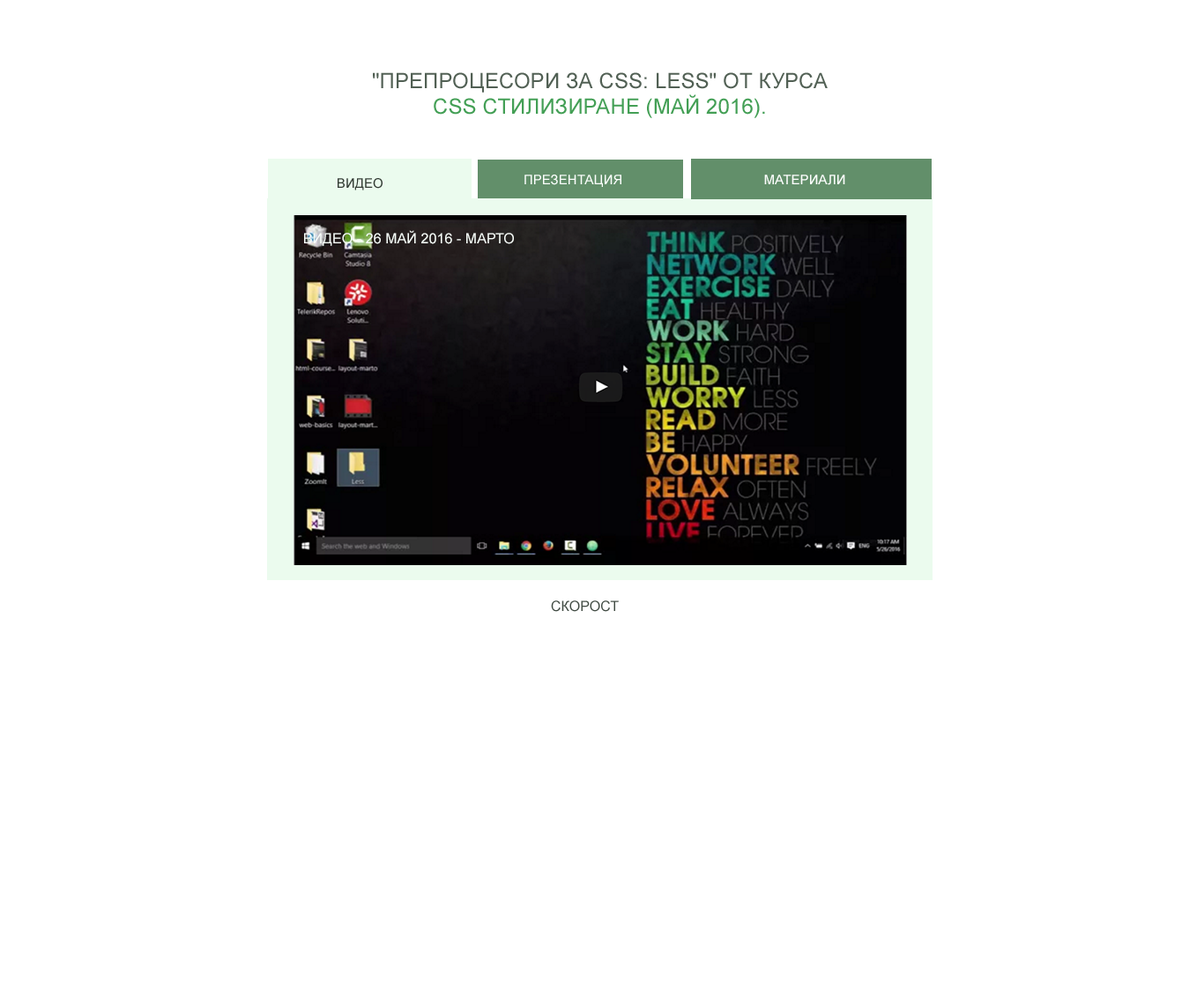
<style>
.page{position:relative;width:1204px;height:991px;background:#ffffff}
.page>*{position:absolute;margin:0}
.t1{font:21.2px "ArialMT";letter-spacing:0.005em;color:#516054;text-transform:uppercase}
.t2{font:21.2px "ArialMT";letter-spacing:0.005em;color:#439f55;text-transform:uppercase}
.t3{font:13.2px "ArialMT";letter-spacing:0.005em;color:#fcfffd;text-transform:uppercase}
.t4{font:14.1px "ArialMT";letter-spacing:0.005em;color:#f7fcf8;text-transform:uppercase}
.t5{font:14.1px "ArialMT";letter-spacing:0.005em;color:#404a42;text-transform:uppercase}
</style>
<div class="page">
<p class="t1" style="left:373px;top:72px;width:455px;height:46px;text-align:center">"Препроцесори за CSS: LESS" от курса <br><span class="t2">CSS стилизиране (май 2016).</span></p>
<p class="t3" style="left:764px;top:174px;width:81px;height:11px">Материали</p>
<p class="t4" style="left:304px;top:230px;width:210px;height:16px">Видео - 26 май 2016 - Марто</p>
<p class="t5" style="left:551px;top:600px;width:68px;height:12px">скоросТ</p>
</div>
